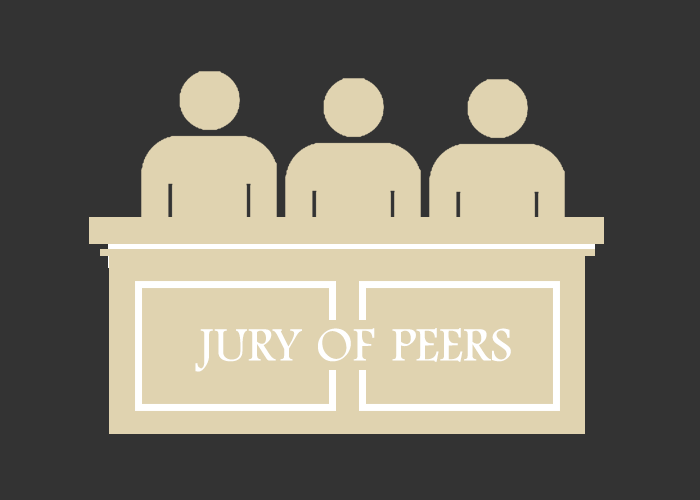
<style>
.page{position:relative;width:700px;height:500px;background:#333333}
.page>*{position:absolute;margin:0}
.t1{font:49.8px "FootlightMTLight";color:#ffffff}
</style>
<div class="page">
<p class="t1" style="left:195px;top:329px;width:107px;height:43px">JURY</p>
<p class="t1" style="left:318px;top:328px;width:57px;height:34px">OF</p>
<p class="t1" style="left:392px;top:328px;width:119px;height:34px">PEERS</p>
</div>
